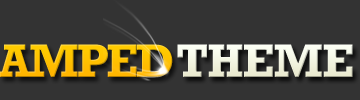
<style>
.page{position:relative;width:360px;height:100px;background:#333333}
.page>*{position:absolute;margin:0}
.t1{font:48px "Rockwell-Bold";letter-spacing:-0.05em;text-transform:uppercase}
.t2{font:48px "Rockwell-Bold";letter-spacing:-0.025em;color:#f1f3e0;text-transform:uppercase}
</style>
<div class="page">
<p class="t1" style="left:0px;top:44px;width:173px;height:33px">Amped</p>
<p class="t2" style="left:177px;top:44px;width:176px;height:33px">Theme</p>
</div>
